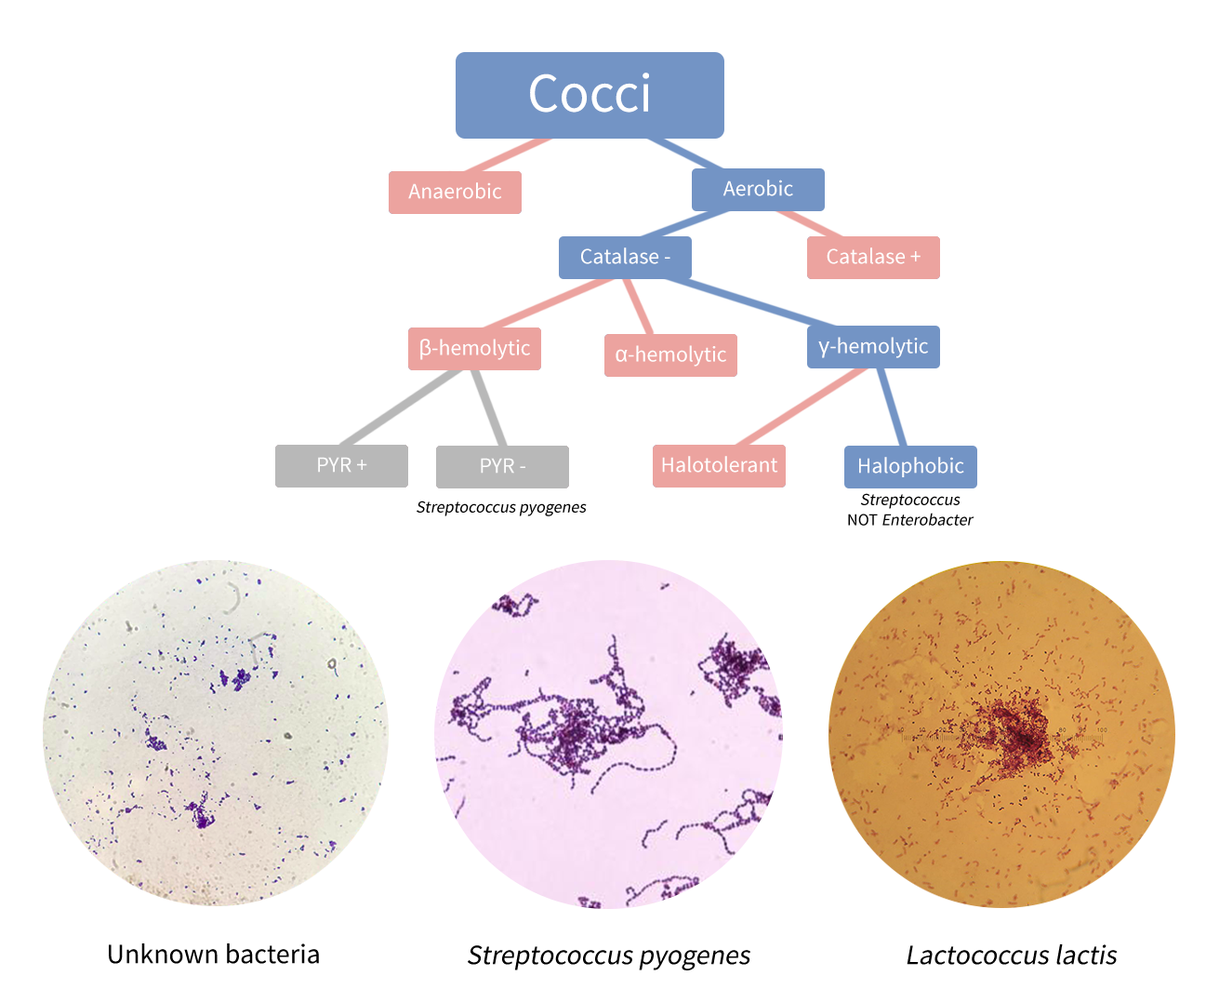
<style>
.page{position:relative;width:1206px;height:989px;background:#ffffff}
.page>*{position:absolute;margin:0}
.t1{font:55.8px "SourceSansPro-Regular";color:#ffffff}
.t2{font:22.1px "SourceSansPro-Regular";color:#ffffff}
.t3{font:22.1px "LiberationSans";color:#ffffff}
.t4{font:16.7px "SourceSansPro-Regular";color:#000000;font-style:italic}
.t5{font:16.7px "SourceSansPro-Regular";color:#000000}
.t6{font:27.9px "SourceSansPro-Regular";color:#000000}
.t7{font:27.9px "SourceSansPro-Regular";color:#000000;font-style:italic}
</style>
<div class="page">
<p class="t1" style="left:530px;top:73px;width:119px;height:40px">Cocci</p>
<p class="t2" style="left:408px;top:182px;width:94px;height:17px">Anaerobic</p>
<p class="t2" style="left:723px;top:179px;width:70px;height:17px">Aerobic</p>
<p class="t2" style="left:581px;top:247px;width:90px;height:17px">Catalase -</p>
<p class="t2" style="left:827px;top:247px;width:94px;height:17px">Catalase +</p>
<p class="t2" style="left:420px;top:339px;width:110px;height:21px"><span class="t3">β</span>-hemolytic</p>
<p class="t2" style="left:818px;top:337px;width:110px;height:21px"><span class="t3">γ</span>-hemolytic</p>
<p class="t2" style="left:616px;top:345px;width:110px;height:21px"><span class="t3">α</span>-hemolytic</p>
<p class="t2" style="left:318px;top:457px;width:49px;height:15px">PYR +</p>
<p class="t2" style="left:481px;top:458px;width:44px;height:15px">PYR -</p>
<p class="t2" style="left:662px;top:456px;width:116px;height:16px">Halotolerant</p>
<p class="t2" style="left:859px;top:457px;width:105px;height:20px">Halophobic</p>
<p class="t4" style="left:848px;top:493px;width:127px;height:32px;text-align:center">Streptococcus <br><span class="t5">NOT </span>Enterobacter</p>
<p class="t4" style="left:417px;top:500px;width:170px;height:16px">Streptococcus pyogenes</p>
<p class="t6" style="left:109px;top:943px;width:210px;height:20px">Unknown bacteria</p>
<p class="t7" style="left:468px;top:945px;width:283px;height:25px">Streptococcus pyogenes</p>
<p class="t7" style="left:907px;top:944px;width:211px;height:20px">Lactococcus lactis</p>
</div>
